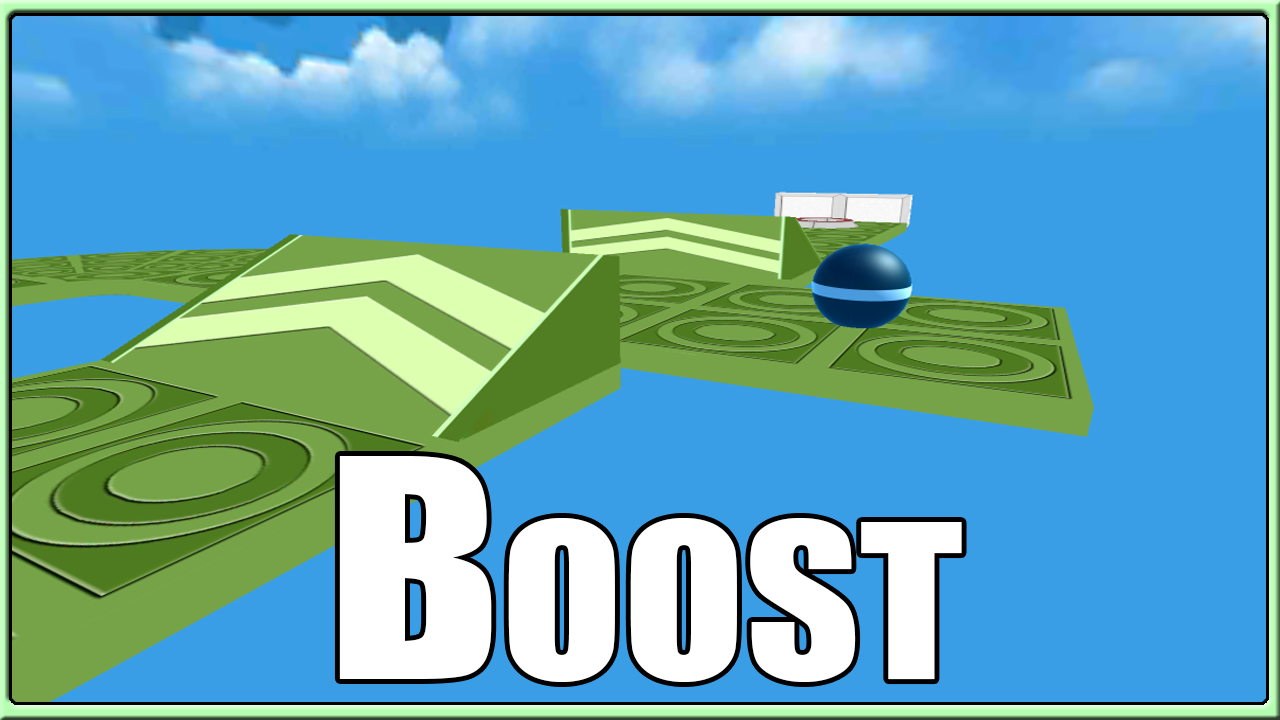
<style>
.page{position:relative;width:1280px;height:720px;background:#3a9ee7}
.page>*{position:absolute;margin:0}
.t1{font:199.4px "Impact";color:#ffffff;scale:1.12 1}
.t2{font:282.3px "Impact";color:#ffffff;scale:1.12 1}
</style>
<div class="page">
<p class="t1" style="left:339px;top:456px;width:623px;height:226px"><span class="t2">B</span>OOST</p>
</div>
